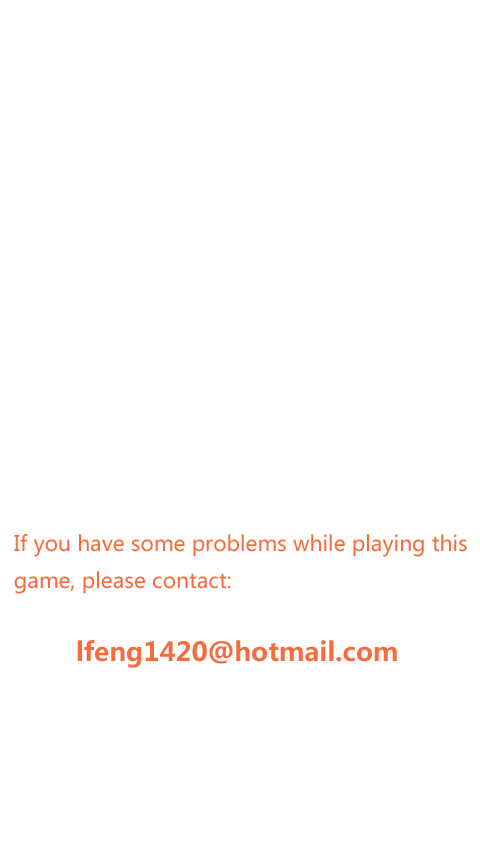
<style>
.page{position:relative;width:480px;height:852px;background:#ffffff}
.page>*{position:absolute;margin:0}
.t1{font:21px "MicrosoftYaHei";color:#f56d3e}
.t2{font:26px "MicrosoftYaHei-Bold";color:#f56d3e}
</style>
<div class="page">
<p class="t1" style="left:14px;top:534px;width:453px;height:60px">If you have some problems while playing this <br>game, please contact:</p>
<p class="t2" style="left:77px;top:640px;width:320px;height:28px">lfeng1420@hotmail.com</p>
</div>
